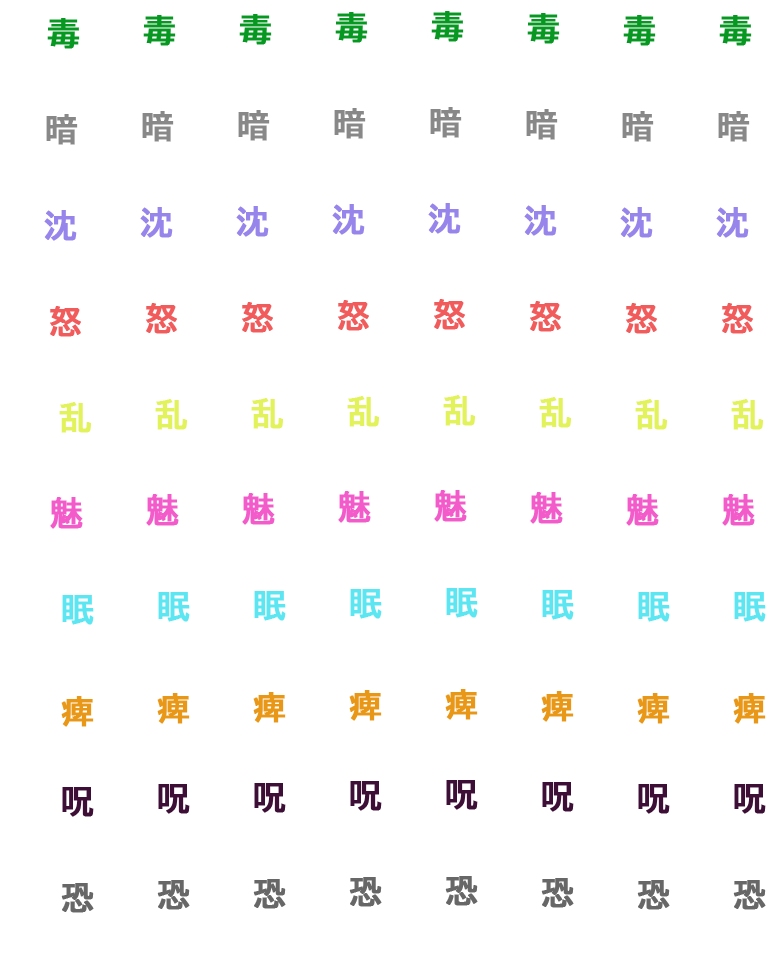
<style>
.page{position:relative;width:768px;height:960px;background:#ffffff}
.page>*{position:absolute;margin:0}
.t1{font:32px "BIZ-UDGothic-Bold";color:#079822;font-weight:bold}
.t2{font:32px "BIZ-UDGothic-Bold";color:#888888;font-weight:bold}
.t3{font:32px "BIZ-UDGothic-Bold";color:#9885eb;font-weight:bold}
.t4{font:32px "BIZ-UDGothic-Bold";color:#f25b5b;font-weight:bold}
.t5{font:32px "BIZ-UDGothic-Bold";color:#e2f25b;font-weight:bold}
.t6{font:32px "BIZ-UDGothic-Bold";color:#f25bc9;font-weight:bold}
.t7{font:32px "BIZ-UDGothic-Bold";color:#5be6f2;font-weight:bold}
.t8{font:32px "BIZ-UDGothic-Bold";color:#e99717;font-weight:bold}
.t9{font:32px "BIZ-UDGothic-Bold";color:#3d0f37;font-weight:bold}
.t10{font:32px "BIZ-UDGothic-Bold";color:#676767;font-weight:bold}
</style>
<div class="page">
<p class="t1" style="left:143px;top:15px;width:33px;height:31px">毒</p>
<p class="t1" style="left:239px;top:14px;width:33px;height:31px">毒</p>
<p class="t1" style="left:335px;top:12px;width:33px;height:31px">毒</p>
<p class="t1" style="left:431px;top:11px;width:33px;height:31px">毒</p>
<p class="t1" style="left:527px;top:13px;width:33px;height:31px">毒</p>
<p class="t1" style="left:623px;top:15px;width:33px;height:31px">毒</p>
<p class="t1" style="left:719px;top:15px;width:33px;height:31px">毒</p>
<p class="t1" style="left:47px;top:18px;width:33px;height:31px">毒</p>
<p class="t2" style="left:142px;top:111px;width:32px;height:31px">暗</p>
<p class="t2" style="left:238px;top:110px;width:32px;height:31px">暗</p>
<p class="t2" style="left:334px;top:108px;width:32px;height:31px">暗</p>
<p class="t2" style="left:430px;top:107px;width:32px;height:31px">暗</p>
<p class="t2" style="left:526px;top:109px;width:32px;height:31px">暗</p>
<p class="t2" style="left:622px;top:111px;width:32px;height:31px">暗</p>
<p class="t2" style="left:718px;top:111px;width:32px;height:31px">暗</p>
<p class="t2" style="left:46px;top:114px;width:32px;height:31px">暗</p>
<p class="t3" style="left:140px;top:207px;width:33px;height:31px">沈</p>
<p class="t3" style="left:236px;top:206px;width:33px;height:31px">沈</p>
<p class="t3" style="left:332px;top:204px;width:33px;height:31px">沈</p>
<p class="t3" style="left:428px;top:203px;width:33px;height:31px">沈</p>
<p class="t3" style="left:524px;top:205px;width:33px;height:31px">沈</p>
<p class="t3" style="left:620px;top:207px;width:33px;height:31px">沈</p>
<p class="t3" style="left:716px;top:207px;width:33px;height:31px">沈</p>
<p class="t3" style="left:44px;top:210px;width:33px;height:31px">沈</p>
<p class="t4" style="left:146px;top:303px;width:31px;height:31px">怒</p>
<p class="t4" style="left:242px;top:302px;width:31px;height:31px">怒</p>
<p class="t4" style="left:338px;top:300px;width:31px;height:31px">怒</p>
<p class="t4" style="left:434px;top:299px;width:31px;height:31px">怒</p>
<p class="t4" style="left:530px;top:301px;width:31px;height:31px">怒</p>
<p class="t4" style="left:626px;top:303px;width:31px;height:31px">怒</p>
<p class="t4" style="left:722px;top:303px;width:31px;height:31px">怒</p>
<p class="t4" style="left:50px;top:306px;width:31px;height:31px">怒</p>
<p class="t5" style="left:155px;top:399px;width:32px;height:31px">乱</p>
<p class="t5" style="left:251px;top:398px;width:32px;height:31px">乱</p>
<p class="t5" style="left:347px;top:396px;width:32px;height:31px">乱</p>
<p class="t5" style="left:443px;top:395px;width:32px;height:31px">乱</p>
<p class="t5" style="left:539px;top:397px;width:32px;height:31px">乱</p>
<p class="t5" style="left:635px;top:399px;width:32px;height:31px">乱</p>
<p class="t5" style="left:731px;top:399px;width:32px;height:31px">乱</p>
<p class="t5" style="left:59px;top:402px;width:32px;height:31px">乱</p>
<p class="t6" style="left:50px;top:497px;width:33px;height:32px">魅</p>
<p class="t6" style="left:146px;top:494px;width:33px;height:32px">魅</p>
<p class="t6" style="left:242px;top:493px;width:33px;height:32px">魅</p>
<p class="t6" style="left:338px;top:491px;width:33px;height:32px">魅</p>
<p class="t6" style="left:434px;top:490px;width:33px;height:32px">魅</p>
<p class="t6" style="left:530px;top:492px;width:33px;height:32px">魅</p>
<p class="t6" style="left:626px;top:494px;width:33px;height:32px">魅</p>
<p class="t6" style="left:722px;top:494px;width:33px;height:32px">魅</p>
<p class="t7" style="left:158px;top:592px;width:32px;height:30px">眠</p>
<p class="t7" style="left:254px;top:591px;width:32px;height:30px">眠</p>
<p class="t7" style="left:350px;top:589px;width:32px;height:30px">眠</p>
<p class="t7" style="left:446px;top:588px;width:32px;height:30px">眠</p>
<p class="t7" style="left:542px;top:590px;width:32px;height:30px">眠</p>
<p class="t7" style="left:638px;top:592px;width:32px;height:30px">眠</p>
<p class="t7" style="left:734px;top:592px;width:32px;height:30px">眠</p>
<p class="t7" style="left:62px;top:595px;width:32px;height:30px">眠</p>
<p class="t8" style="left:445px;top:689px;width:33px;height:31px">痺</p>
<p class="t8" style="left:61px;top:696px;width:33px;height:31px">痺</p>
<p class="t8" style="left:157px;top:693px;width:33px;height:31px">痺</p>
<p class="t8" style="left:253px;top:692px;width:33px;height:31px">痺</p>
<p class="t8" style="left:349px;top:690px;width:33px;height:31px">痺</p>
<p class="t8" style="left:541px;top:691px;width:33px;height:31px">痺</p>
<p class="t8" style="left:637px;top:693px;width:33px;height:31px">痺</p>
<p class="t8" style="left:733px;top:693px;width:33px;height:31px">痺</p>
<p class="t9" style="left:158px;top:784px;width:32px;height:30px">呪</p>
<p class="t9" style="left:254px;top:783px;width:32px;height:30px">呪</p>
<p class="t9" style="left:350px;top:781px;width:32px;height:30px">呪</p>
<p class="t9" style="left:446px;top:780px;width:32px;height:30px">呪</p>
<p class="t9" style="left:542px;top:782px;width:32px;height:30px">呪</p>
<p class="t9" style="left:638px;top:784px;width:32px;height:30px">呪</p>
<p class="t9" style="left:734px;top:784px;width:32px;height:30px">呪</p>
<p class="t9" style="left:62px;top:787px;width:32px;height:30px">呪</p>
<p class="t10" style="left:157px;top:880px;width:33px;height:30px">恐</p>
<p class="t10" style="left:253px;top:879px;width:33px;height:30px">恐</p>
<p class="t10" style="left:349px;top:877px;width:33px;height:30px">恐</p>
<p class="t10" style="left:445px;top:876px;width:33px;height:30px">恐</p>
<p class="t10" style="left:541px;top:878px;width:33px;height:30px">恐</p>
<p class="t10" style="left:637px;top:880px;width:33px;height:30px">恐</p>
<p class="t10" style="left:733px;top:880px;width:33px;height:30px">恐</p>
<p class="t10" style="left:61px;top:883px;width:33px;height:30px">恐</p>
</div>
